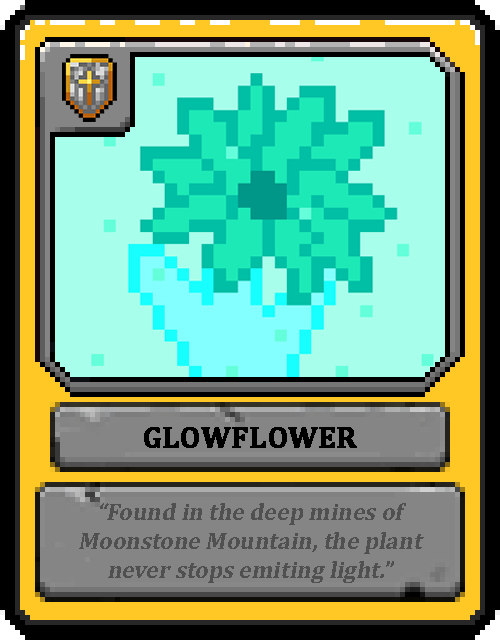
<style>
.page{position:relative;width:500px;height:640px}
.page>*{position:absolute;margin:0}
.t1{font:30px "Cambria-Bold";color:#000000;text-transform:uppercase;font-weight:bold}
.t2{font:24px "Cambria-Bold";color:#505050;font-style:italic}
</style>
<div class="page">
<p class="t1" style="left:144px;top:427px;width:213px;height:21px">Glowflower</p>
<p class="t2" style="left:79px;top:503px;width:345px;height:80px;text-align:center">“Found in the deep mines of Moonstone Mountain, the plant never stops emiting light.”</p>
</div>
